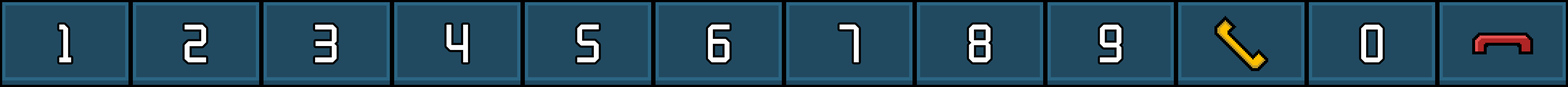
<style>
.page{position:relative;width:1568px;height:87px;background:#214a61}
.page>*{position:absolute;margin:0}
.t1{font:52.3px "zcoolqingkehuangyouti-Regular";letter-spacing:0.016em;color:#ffffff;text-transform:uppercase}
</style>
<div class="page">
<p class="t1" style="left:59px;top:24px;width:12px;height:38px">1</p>
<p class="t1" style="left:184px;top:25px;width:22px;height:37px">2</p>
<p class="t1" style="left:315px;top:25px;width:22px;height:37px">3</p>
<p class="t1" style="left:446px;top:25px;width:22px;height:37px">4</p>
<p class="t1" style="left:577px;top:24px;width:22px;height:38px">5</p>
<p class="t1" style="left:708px;top:24px;width:22px;height:38px">6</p>
<p class="t1" style="left:840px;top:24px;width:19px;height:38px">7</p>
<p class="t1" style="left:969px;top:24px;width:22px;height:38px">8</p>
<p class="t1" style="left:1100px;top:25px;width:22px;height:37px">9</p>
<p class="t1" style="left:1361px;top:25px;width:22px;height:37px">0</p>
</div>
